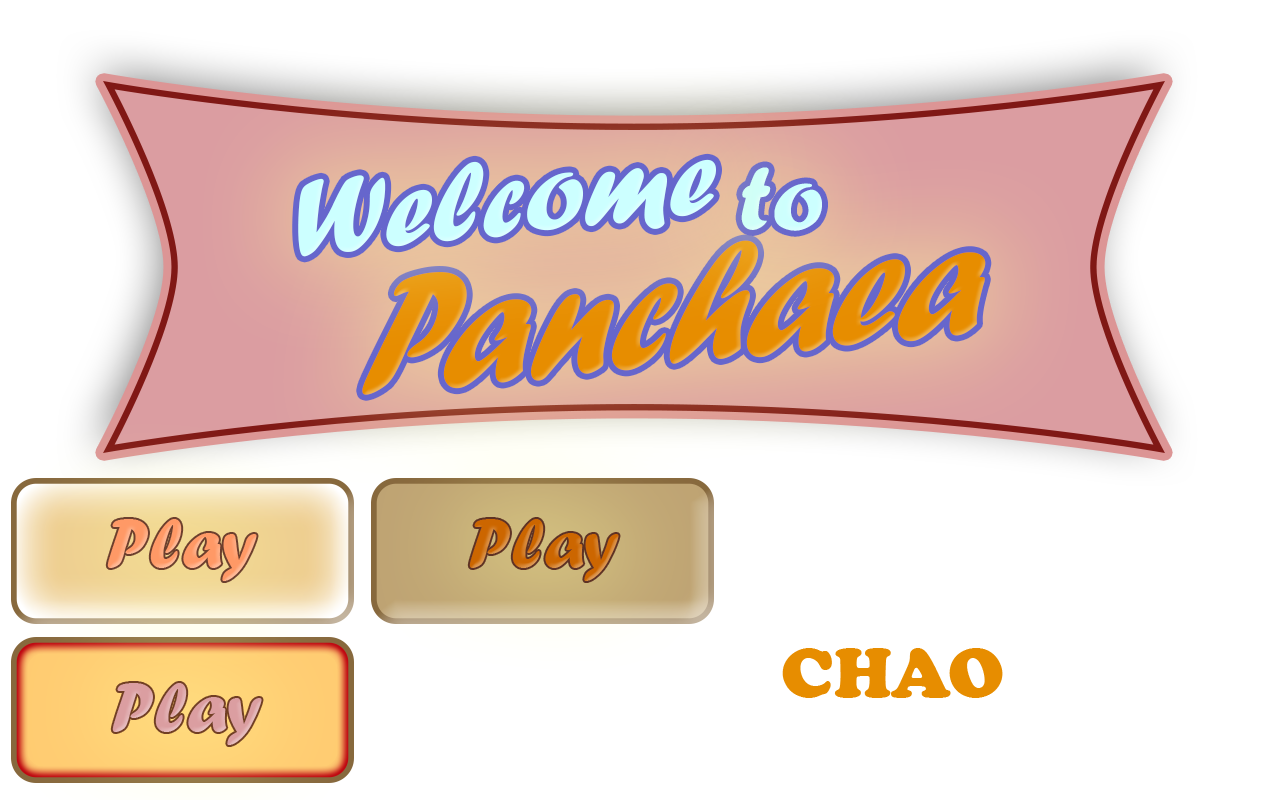
<style>
.page{position:relative;width:1280px;height:800px;background:#ffffff}
.page>*{position:absolute;margin:0}
.t1{font:114.3px "ForteMT";color:#ccffff}
.t2{font:95.8px "ForteMT";color:#ccffff}
.t3{font:180.3px "ForteMT";color:#e78d00;scale:0.86 1}
.t4{font:72px "ForteMT";color:#ff9966}
.t5{font:72px "ForteMT";color:#cc6600}
.t6{font:72px "CooperBlack";color:#e78d00}
.t7{font:72px "ForteMT";color:#db9ea1}
</style>
<div class="page">
<p class="t1" style="left:298px;top:159px;width:418px;height:98px;rotate:-6deg">Welcome</p>
<p class="t2" style="left:741px;top:167px;width:81px;height:64px;rotate:-1deg">to</p>
<p class="t3" style="left:362px;top:240px;width:624px;height:155px;rotate:-6deg">Panchaea</p>
<p class="t4" style="left:107px;top:519px;width:150px;height:62px">Play</p>
<p class="t5" style="left:469px;top:519px;width:150px;height:62px">Play</p>
<p class="t6" style="left:782px;top:648px;width:221px;height:50px">CHAO</p>
<p class="t7" style="left:112px;top:683px;width:150px;height:62px">Play</p>
</div>
